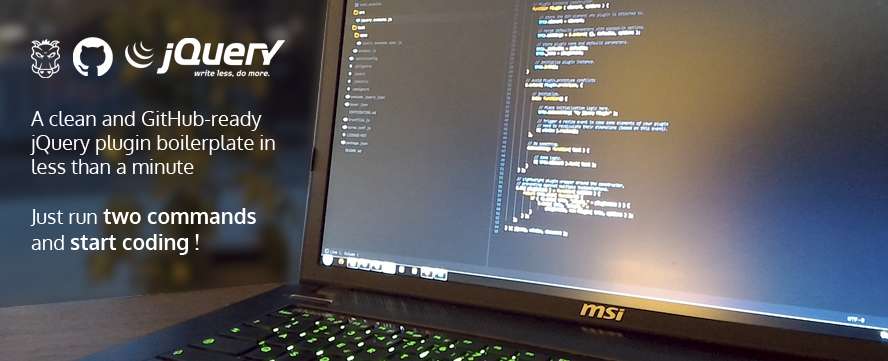
<style>
.page{position:relative;width:888px;height:361px}
.page>*{position:absolute;margin:0}
.t1{font:20px "Oxygen-Regular";color:#ffffff}
.t2{font:21px "Oxygen-Bold";color:#ffffff}
</style>
<div class="page">
<p class="t1" style="left:30px;top:111px;width:245px;height:144px">A clean and GitHub-ready <br>jQuery plugin boilerplate in <br>less than a minute<br><br>Just run <span class="t2">two commands<br></span>and <span class="t2">start coding !</span></p>
</div>
